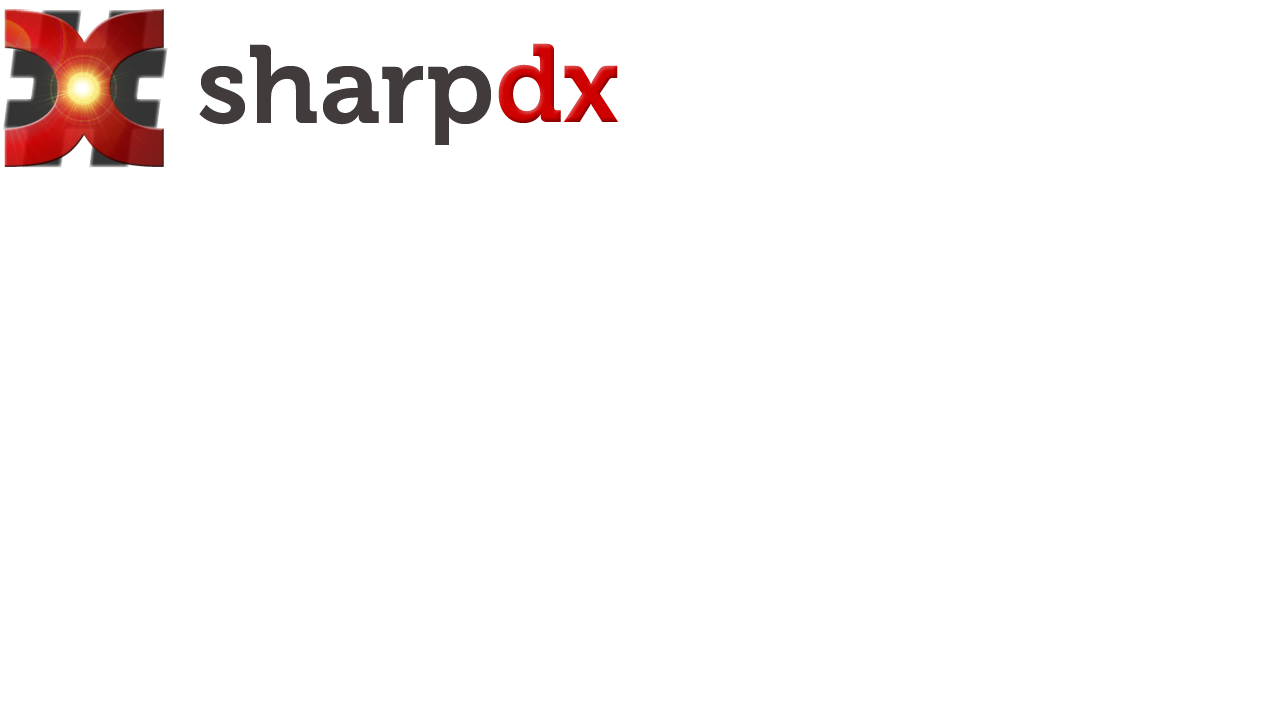
<style>
.page{position:relative;width:1280px;height:720px;background:#ffffff}
.page>*{position:absolute;margin:0}
.t1{font:110px "Museo-700";color:#413b3b}
.t2{font:110px "Museo-700";color:#cf0000}
</style>
<div class="page">
<p class="t1" style="left:199px;top:44px;width:292px;height:101px">sharp</p>
<p class="t2" style="left:498px;top:43px;width:120px;height:80px">dx</p>
</div>
